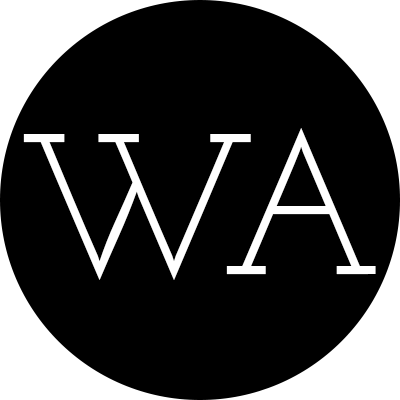
<style>
.page{position:relative;width:400px;height:400px;background:#000000}
.page>*{position:absolute;margin:0}
.t1{font:200px "JosefinSlab";color:#ffffff}
</style>
<div class="page">
<p class="t1" style="left:23px;top:128px;width:353px;height:152px">WA</p>
</div>
